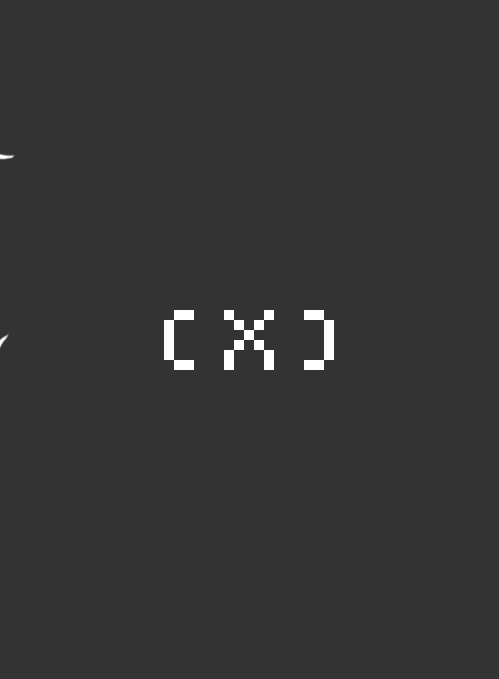
<style>
.page{position:relative;width:499px;height:679px;background:#333333}
.page>*{position:absolute;margin:0}
.t1{font:80px "Minecraft";color:#ffffff}
</style>
<div class="page">
<p class="t1" style="left:164px;top:310px;width:170px;height:60px">( X )</p>
</div>
